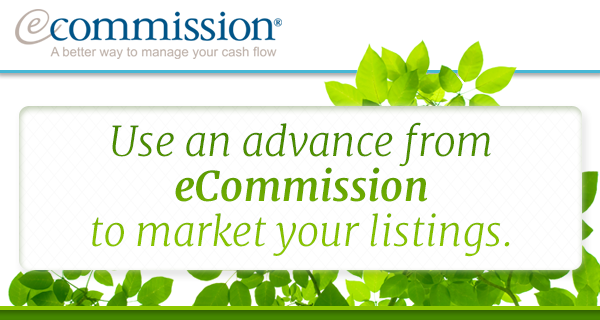
<style>
.page{position:relative;width:600px;height:320px;background:#ffffff}
.page>*{position:absolute;margin:0}
.t1{font:40.8px/45px "Merriweather-LightItalic"}
.t2{font:40.8px/45px "Merriweather-BoldItalic"}
</style>
<div class="page">
<p class="t1" style="left:92px;top:122px;width:418px;height:135px;text-align:center">Use an advance from<br><span class="t2">eCommission<br></span>to market your listings.</p>
</div>
